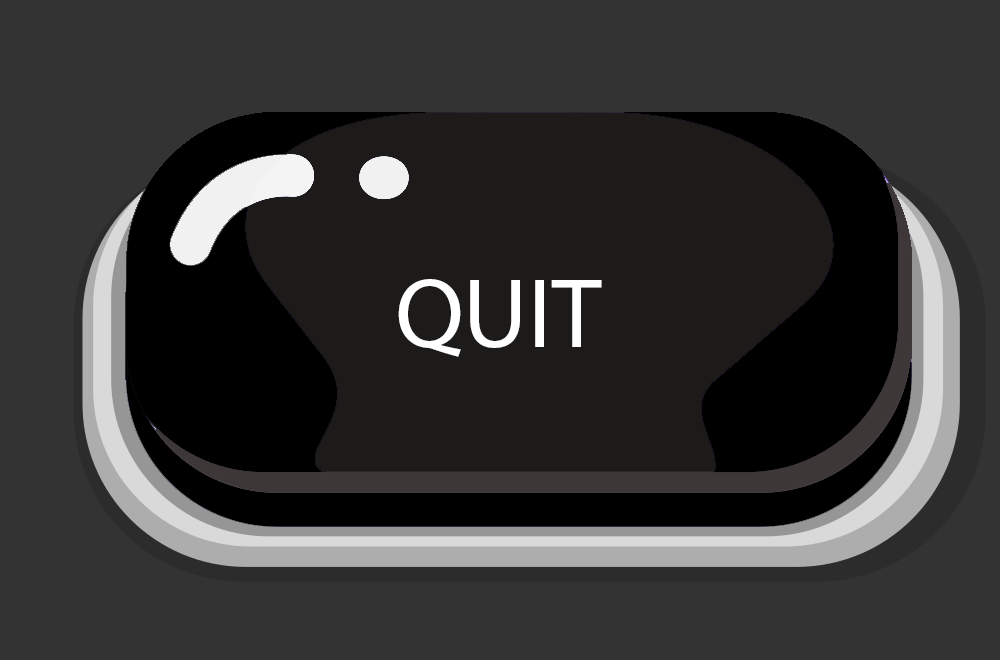
<style>
.page{position:relative;width:1000px;height:660px;background:#333333}
.page>*{position:absolute;margin:0}
.t1{font:100px "MyriadPro-Regular";color:#ffffff}
</style>
<div class="page">
<p class="t1" style="left:398px;top:279px;width:204px;height:78px">QUIT</p>
</div>
